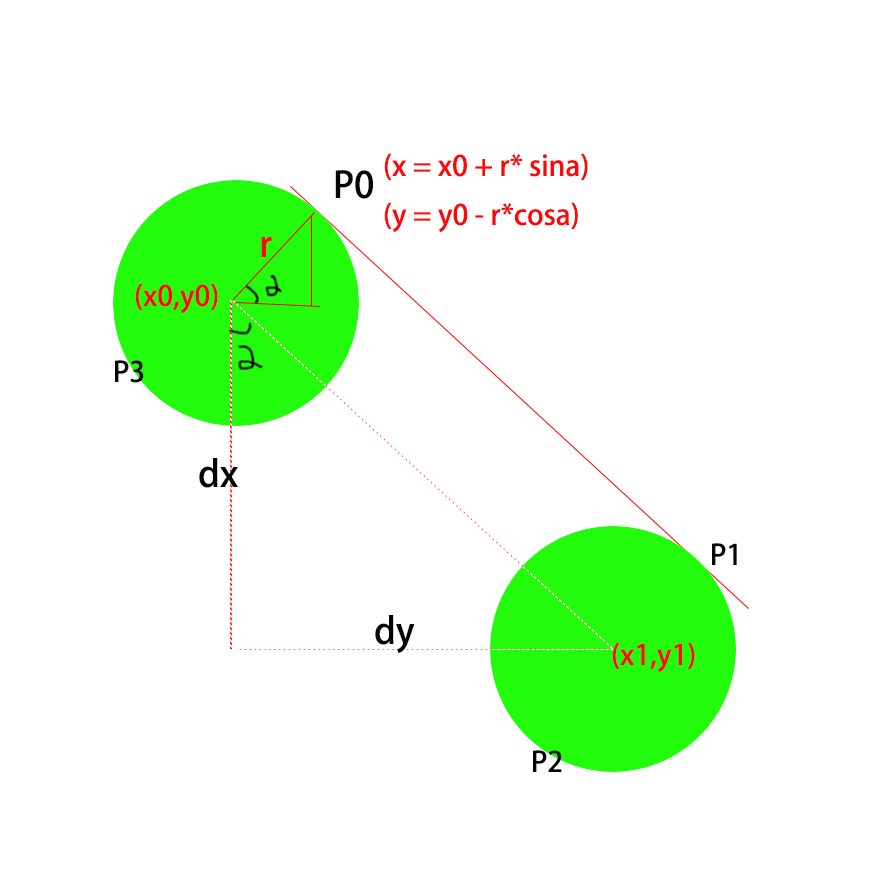
<style>
.page{position:relative;width:896px;height:874px;background:#ffffff}
.page>*{position:absolute;margin:0}
.t1{font:28px "AdobeHeitiStd-Regular";color:#f90a0a}
.t2{font:36px "AdobeHeitiStd-Regular";color:#030303}
.t3{font:36px "AdobeHeitiStd-Regular";color:#f90a0a}
.t4{font:28px "AdobeHeitiStd-Regular";color:#060606}
</style>
<div class="page">
<p class="t1" style="left:384px;top:153px;width:204px;height:79px">(x = x0 + r* sina)<br>(y = y0 - r*cosa)</p>
<p class="t2" style="left:335px;top:170px;width:38px;height:29px">P0</p>
<p class="t3" style="left:261px;top:236px;width:11px;height:21px">r</p>
<p class="t1" style="left:135px;top:283px;width:83px;height:30px">(x0,y0)</p>
<p class="t4" style="left:115px;top:360px;width:29px;height:23px">P3</p>
<p class="t2" style="left:199px;top:458px;width:39px;height:30px">dx</p>
<p class="t4" style="left:712px;top:543px;width:25px;height:22px">P1</p>
<p class="t2" style="left:375px;top:615px;width:40px;height:38px">dy</p>
<p class="t1" style="left:612px;top:642px;width:83px;height:30px">(x1,y1)</p>
<p class="t4" style="left:533px;top:750px;width:29px;height:22px">P2</p>
</div>
